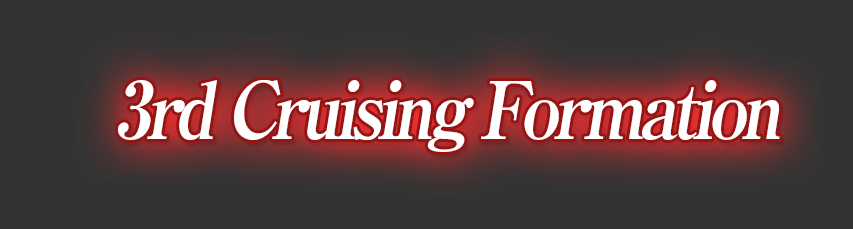
<style>
.page{position:relative;width:853px;height:229px;background:#333333}
.page>*{position:absolute;margin:0}
.t1{font:80px "RyuminPro-ExBold";letter-spacing:-0.08em;color:#ffffff;font-style:italic;scale:0.9 1}
</style>
<div class="page">
<p class="t1" style="left:118px;top:80px;width:662px;height:72px">3rd Cruising Formation</p>
</div>
